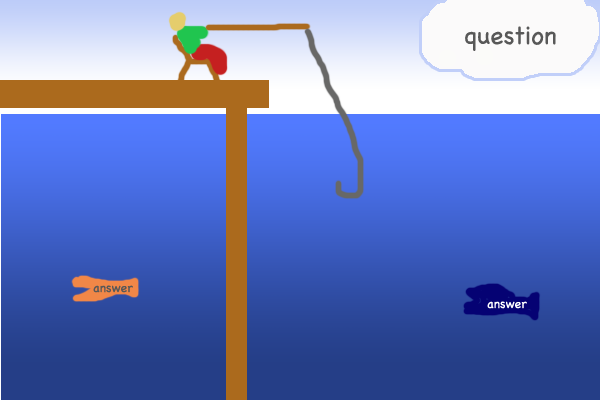
<style>
.page{position:relative;width:600px;height:400px}
.page>*{position:absolute;margin:0}
.t1{font:25px "Chalkboard";color:#585858}
.t2{font:12.5px "Chalkboard";color:#585858}
.t3{font:12.5px "Chalkboard";color:#ffffff}
</style>
<div class="page">
<p class="t1" style="left:465px;top:26px;width:91px;height:25px">question</p>
<p class="t2" style="left:93px;top:285px;width:40px;height:8px">answer</p>
<p class="t3" style="left:487px;top:301px;width:40px;height:8px">answer</p>
</div>
